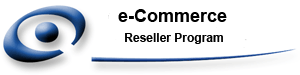
<style>
.page{position:relative;width:300px;height:75px;background:#ffffff}
.page>*{position:absolute;margin:0}
.t1{font:18px "Arial-BoldMT";color:#010101}
.t2{font:12px "Arial-BoldMT";color:#010101}
</style>
<div class="page">
<p class="t1" style="left:118px;top:9px;width:109px;height:13px">e-Commerce</p>
<p class="t2" style="left:125px;top:33px;width:98px;height:11px">Reseller Program</p>
</div>
